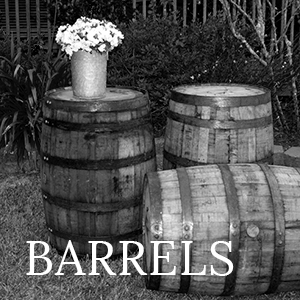
<style>
.page{position:relative;width:300px;height:300px}
.page>*{position:absolute;margin:0}
.t1{font:47.6px "Lora-Regular";letter-spacing:0.025em;color:#ffffff}
</style>
<div class="page">
<p class="t1" style="left:26px;top:240px;width:208px;height:36px">BARRELS</p>
</div>
